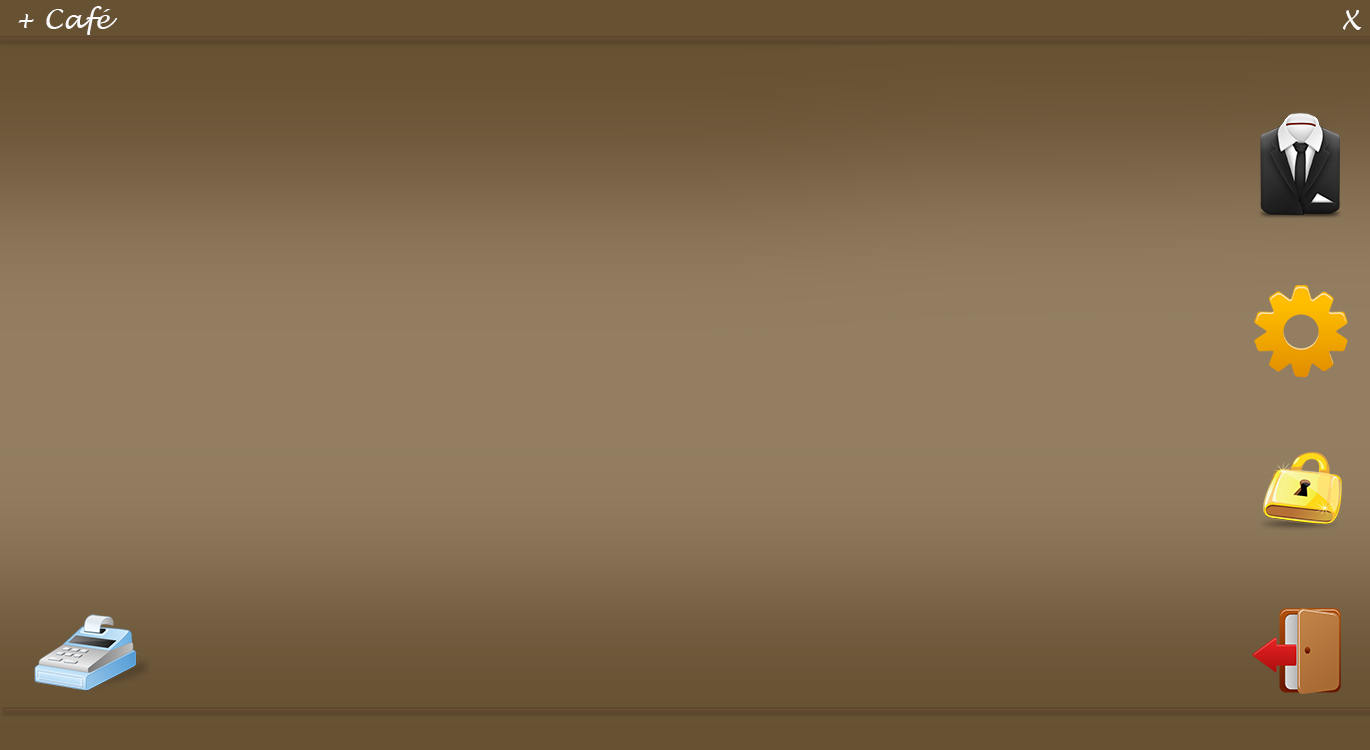
<style>
.page{position:relative;width:1370px;height:750px}
.page>*{position:absolute;margin:0}
.t1{font:27.5px "LucidaHandwriting-Italic";color:#f9f9f9}
</style>
<div class="page">
<p class="t1" style="left:18px;top:6px;width:100px;height:29px">+ Café</p>
<p class="t1" style="left:1343px;top:10px;width:19px;height:20px">X</p>
</div>
